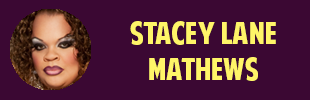
<style>
.page{position:relative;width:310px;height:100px;background:#3b0833}
.page>*{position:absolute;margin:0}
.t1{font:30px "AmericanPurpose";color:#fff568}
.t2{font:24px "Tahoma";color:#ffffff}
</style>
<div class="page">
<p class="t1" style="left:130px;top:21px;width:146px;height:60px;text-align:center"><span class="t2"><br></span>Stacey lane Mathews</p>
</div>
